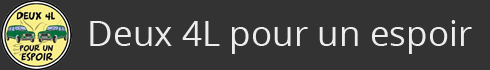
<style>
.page{position:relative;width:490px;height:70px;background:#333333}
.page>*{position:absolute;margin:0}
.t1{font:35.2px "OpenSans";color:#ededed}
</style>
<div class="page">
<p class="t1" style="left:90px;top:20px;width:382px;height:34px">Deux 4L pour un espoir</p>
</div>
